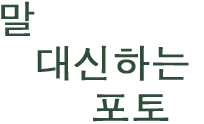
<style>
.page{position:relative;width:204px;height:124px;background:#ffffff}
.page>*{position:absolute;margin:0}
.t1{font:38.5px/43.9px "AppleGothic";color:#193a23;font-weight:bold}
.t2{font:38.5px/43.9px "Helvetica";color:#193a23}
</style>
<div class="page">
<p class="t1" style="left:1px;top:1px;width:188px;height:121px;opacity:0.9"><span class="t2"> </span>말<br>    대신하는 <br>         포토</p>
</div>
